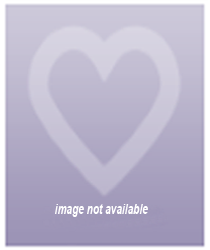
<style>
.page{position:relative;width:210px;height:250px}
.page>*{position:absolute;margin:0}
.t1{font:14.3px "Arial-BoldItalicMT";color:#ffffff;scale:0.71 1}
</style>
<div class="page">
<p class="t1" style="left:55px;top:204px;width:93px;height:13px">image not available</p>
</div>
